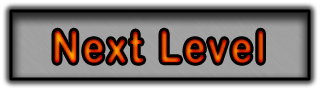
<style>
.page{position:relative;width:321px;height:91px}
.page>*{position:absolute;margin:0}
.t1{font:43.2px "ArialRoundedMTBold";letter-spacing:0.1em;scale:0.83 1}
</style>
<div class="page">
<p class="t1" style="left:54px;top:30px;width:209px;height:33px">Next Level</p>
</div>
